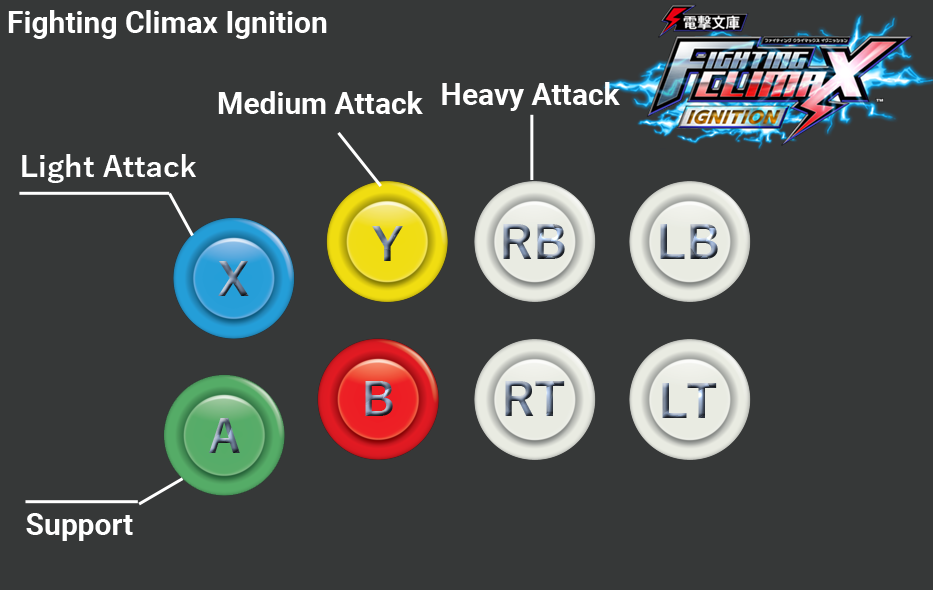
<style>
.page{position:relative;width:933px;height:590px;background:#363838}
.page>*{position:absolute;margin:0}
.t1{font:30px "Roboto-Bold";color:#ffffff}
.t2{font:30px "YuGothic-Bold";color:#ffffff}
</style>
<div class="page">
<p class="t1" style="left:8px;top:10px;width:319px;height:29px">Fighting Climax Ignition</p>
<p class="t1" style="left:442px;top:82px;width:178px;height:29px">Heavy Attack</p>
<p class="t1" style="left:218px;top:91px;width:205px;height:23px">Medium Attack</p>
<p class="t2" style="left:22px;top:154px;width:174px;height:29px">Light Attack</p>
<p class="t1" style="left:26px;top:513px;width:107px;height:28px">Support</p>
</div>
